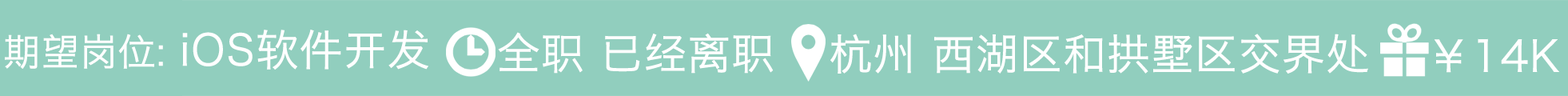
<style>
.page{position:relative;width:1568px;height:96px;background:#91cebe}
.page>*{position:absolute;margin:0}
.t1{font:42.6px "HiraginoSansGB-W3";color:#ffffff;font-weight:bold}
.t2{font:37.3px "HiraginoSansGB-W3";color:#ffffff;font-weight:bold}
</style>
<div class="page">
<p class="t1" style="left:5px;top:30px;width:423px;height:40px"><span class="t2">期望岗位: </span>iOS软件开发</p>
<p class="t1" style="left:498px;top:32px;width:276px;height:42px">全职 已经离职</p>
<p class="t1" style="left:830px;top:34px;width:538px;height:40px">杭州 西湖区和拱墅区交界处</p>
<p class="t1" style="left:1434px;top:38px;width:125px;height:35px">￥14K</p>
</div>
